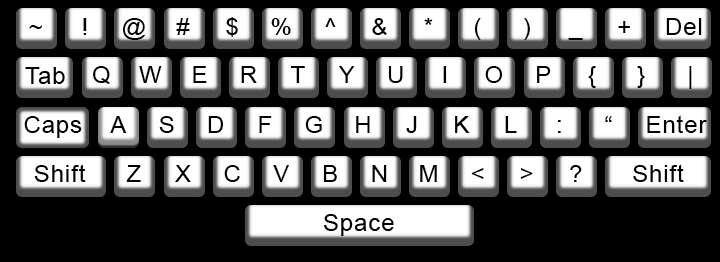
<style>
.page{position:relative;width:720px;height:262px;background:#000000}
.page>*{position:absolute;margin:0}
.t1{font:40.9px "ArialMT";letter-spacing:0.04em;color:#000000}
</style>
<div class="page">
<p class="t1" style="left:226px;top:17px;width:12px;height:20px">$</p>
<p class="t1" style="left:29px;top:25px;width:13px;height:4px">~</p>
<p class="t1" style="left:83px;top:18px;width:4px;height:17px">!</p>
<p class="t1" style="left:122px;top:18px;width:24px;height:22px">@</p>
<p class="t1" style="left:176px;top:18px;width:14px;height:17px">#</p>
<p class="t1" style="left:271px;top:18px;width:20px;height:17px">%</p>
<p class="t1" style="left:325px;top:18px;width:11px;height:9px">^</p>
<p class="t1" style="left:372px;top:18px;width:15px;height:17px">&amp;</p>
<p class="t1" style="left:424px;top:18px;width:9px;height:7px">*</p>
<p class="t1" style="left:474px;top:18px;width:7px;height:22px">(</p>
<p class="t1" style="left:524px;top:18px;width:6px;height:22px">)</p>
<p class="t1" style="left:618px;top:21px;width:12px;height:12px">+</p>
<p class="t1" style="left:666px;top:18px;width:36px;height:17px">Del</p>
<p class="t1" style="left:568px;top:38px;width:15px;height:2px">_</p>
<p class="t1" style="left:25px;top:67px;width:40px;height:17px">Tab</p>
<p class="t1" style="left:93px;top:66px;width:17px;height:18px">Q</p>
<p class="t1" style="left:139px;top:66px;width:23px;height:17px">W</p>
<p class="t1" style="left:193px;top:66px;width:14px;height:17px">E</p>
<p class="t1" style="left:241px;top:66px;width:16px;height:17px">R</p>
<p class="t1" style="left:290px;top:66px;width:15px;height:17px">T</p>
<p class="t1" style="left:339px;top:66px;width:16px;height:17px">Y</p>
<p class="t1" style="left:388px;top:66px;width:15px;height:17px">U</p>
<p class="t1" style="left:443px;top:66px;width:4px;height:17px">I</p>
<p class="t1" style="left:485px;top:66px;width:18px;height:17px">O</p>
<p class="t1" style="left:537px;top:66px;width:14px;height:17px">P</p>
<p class="t1" style="left:588px;top:66px;width:8px;height:22px">{</p>
<p class="t1" style="left:637px;top:66px;width:8px;height:22px">}</p>
<p class="t1" style="left:689px;top:66px;width:3px;height:23px">|</p>
<p class="t1" style="left:24px;top:116px;width:58px;height:22px">Caps</p>
<p class="t1" style="left:110px;top:116px;width:17px;height:17px">A</p>
<p class="t1" style="left:159px;top:116px;width:15px;height:17px">S</p>
<p class="t1" style="left:208px;top:116px;width:16px;height:17px">D</p>
<p class="t1" style="left:259px;top:116px;width:13px;height:17px">F</p>
<p class="t1" style="left:305px;top:116px;width:17px;height:17px">G</p>
<p class="t1" style="left:356px;top:116px;width:14px;height:17px">H</p>
<p class="t1" style="left:406px;top:116px;width:11px;height:17px">J</p>
<p class="t1" style="left:455px;top:116px;width:15px;height:17px">K</p>
<p class="t1" style="left:505px;top:116px;width:12px;height:17px">L</p>
<p class="t1" style="left:558px;top:120px;width:3px;height:13px">:</p>
<p class="t1" style="left:605px;top:116px;width:7px;height:6px">“</p>
<p class="t1" style="left:647px;top:115px;width:60px;height:18px">Enter</p>
<p class="t1" style="left:34px;top:164px;width:52px;height:18px">Shift</p>
<p class="t1" style="left:126px;top:165px;width:15px;height:17px">Z</p>
<p class="t1" style="left:175px;top:165px;width:16px;height:17px">X</p>
<p class="t1" style="left:224px;top:165px;width:16px;height:17px">C</p>
<p class="t1" style="left:273px;top:165px;width:16px;height:17px">V</p>
<p class="t1" style="left:323px;top:165px;width:14px;height:17px">B</p>
<p class="t1" style="left:372px;top:165px;width:15px;height:17px">N</p>
<p class="t1" style="left:420px;top:165px;width:17px;height:17px">M</p>
<p class="t1" style="left:471px;top:168px;width:13px;height:11px">&lt;</p>
<p class="t1" style="left:520px;top:168px;width:13px;height:11px">&gt;</p>
<p class="t1" style="left:570px;top:165px;width:12px;height:17px">?</p>
<p class="t1" style="left:633px;top:164px;width:51px;height:18px">Shift</p>
<p class="t1" style="left:324px;top:214px;width:70px;height:22px">Space</p>
</div>
